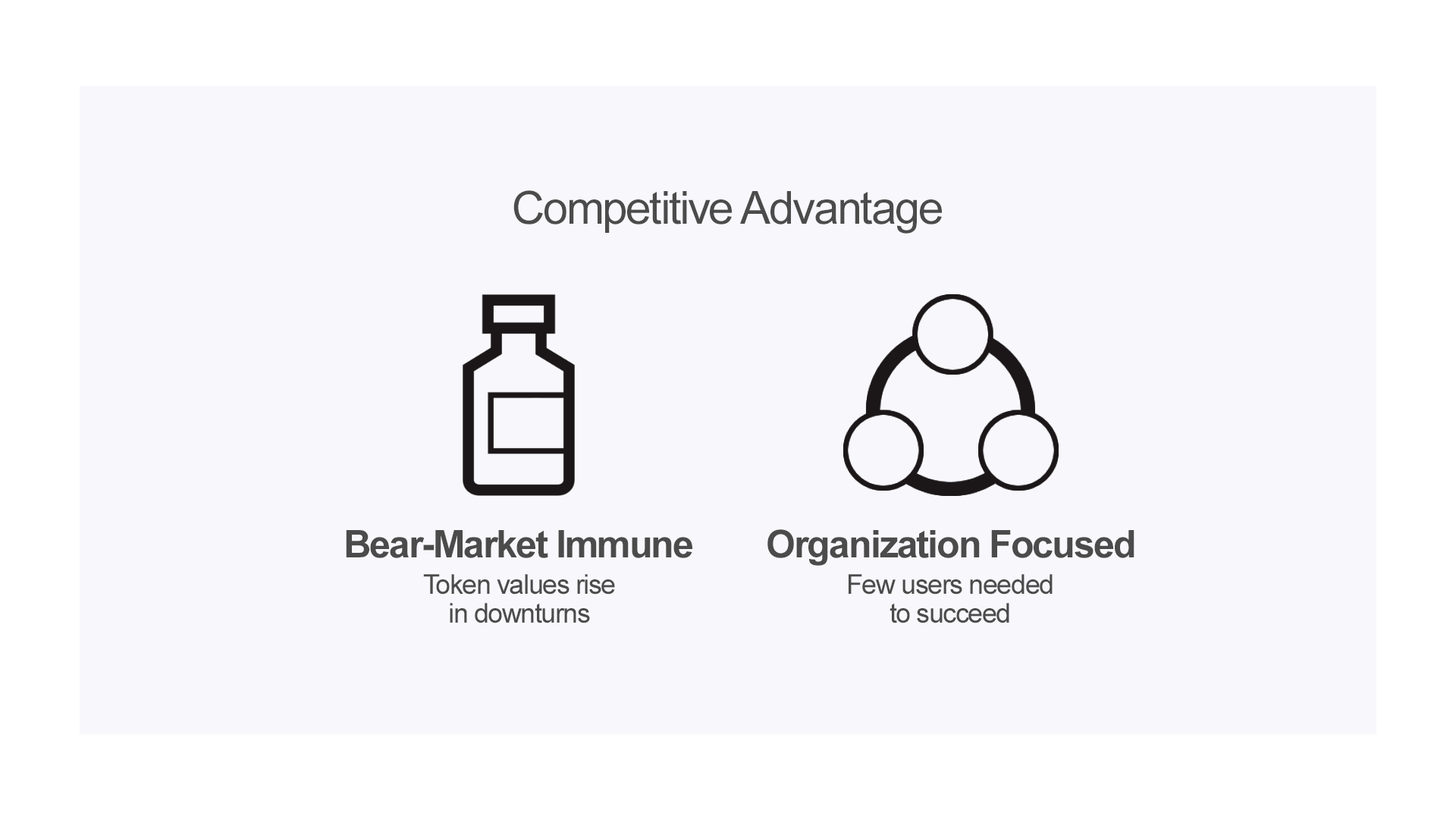
<style>
.page{position:relative;width:1456px;height:819px;background:#f8f8fc}
.page>*{position:absolute;margin:0}
.t1{font:45.5px "ArialMT";letter-spacing:-0.04em;color:#4b4b4b}
.t2{font:38.1px "Arial-BoldMT";letter-spacing:-0.04em;color:#4b4b4b}
.t3{font:27.3px/28.9px "ArialMT";letter-spacing:-0.04em;color:#4b4b4b}
</style>
<div class="page">
<p class="t1" style="left:513px;top:190px;width:429px;height:44px">Competitive Advantage</p>
<p class="t2" style="left:346px;top:530px;width:346px;height:28px">Bear-Market Immune</p>
<p class="t2" style="left:767px;top:529px;width:367px;height:37px">Organization Focused</p>
<p class="t3" style="left:423px;top:574px;width:192px;height:49px;text-align:center">Token values rise<br>in downturns</p>
<p class="t3" style="left:849px;top:574px;width:204px;height:49px;text-align:center">Few users needed<br>to succeed</p>
</div>
